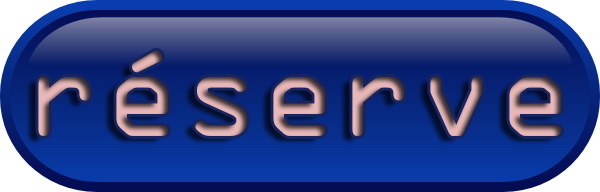
<style>
.page{position:relative;width:600px;height:192px}
.page>*{position:absolute;margin:0}
.t1{font:109.5px "OCRAStd"}
</style>
<div class="page">
<p class="t1" style="left:38px;top:50px;width:523px;height:86px">réserve</p>
</div>
